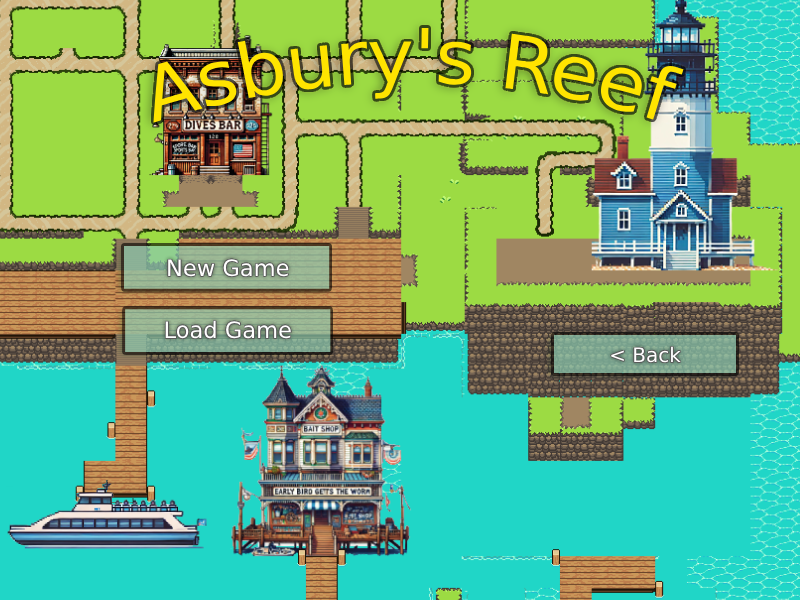
<style>
.page{position:relative;width:800px;height:600px;background:#20d6c7}
.page>*{position:absolute;margin:0}
.t1{font:75px "DejaVuSans";color:#ffe400}
.t2{font:22.6px "DejaVuSans";color:#ffffff}
.t3{font:20px "DejaVuSans";color:#ffffff}
</style>
<div class="page">
<p class="t1" style="left:153px;top:27px;width:531px;height:96px">Asbury's Reef</p>
<p class="t2" style="left:168px;top:259px;width:121px;height:18px">New Game</p>
<p class="t2" style="left:165px;top:320px;width:126px;height:19px">Load Game</p>
<p class="t3" style="left:611px;top:346px;width:70px;height:17px">&lt; Back</p>
</div>
